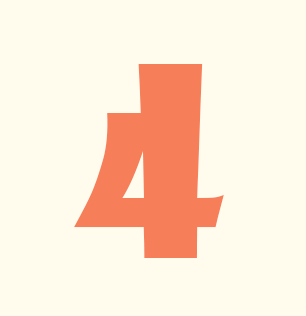
<style>
.page{position:relative;width:306px;height:316px;background:#fffced}
.page>*{position:absolute;margin:0}
.t1{font:258.9px "ShowcardGothic-Reg";color:#f67e59;text-transform:uppercase}
</style>
<div class="page">
<p class="t1" style="left:74px;top:64px;width:150px;height:194px">4</p>
</div>
